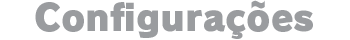
<style>
.page{position:relative;width:350px;height:40px;background:#ffffff}
.page>*{position:absolute;margin:0}
.t1{font:36px "RodinPro-UB";letter-spacing:-0.002em;color:#9a9c9f}
</style>
<div class="page">
<p class="t1" style="left:35px;top:0px;width:278px;height:39px">Configurações</p>
</div>
